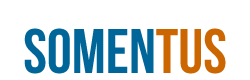
<style>
.page{position:relative;width:250px;height:80px;background:#ffffff}
.page>*{position:absolute;margin:0}
.t1{font:63px "BebasNeue";color:#006699}
.t2{font:63px "BebasNeue";color:#cc6600}
</style>
<div class="page">
<p class="t1" style="left:24px;top:28px;width:202px;height:46px">SOMEN<span class="t2">TUS</span></p>
</div>
